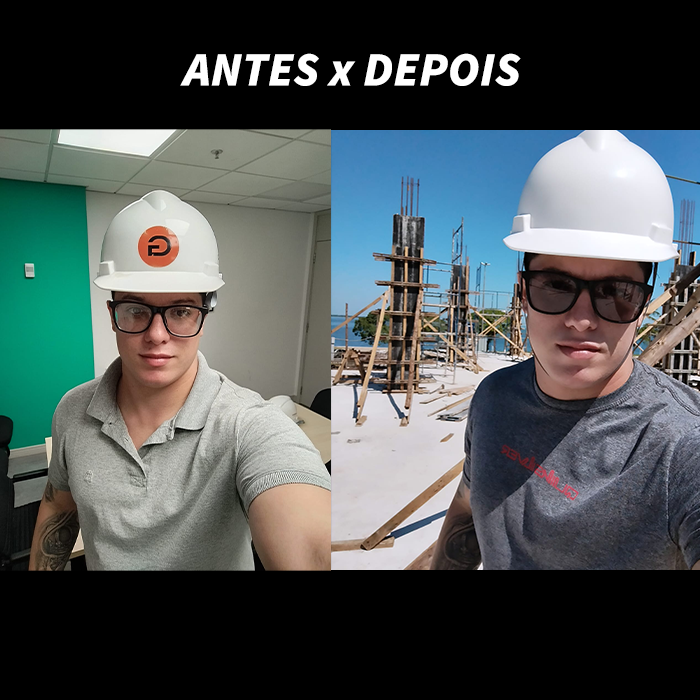
<style>
.page{position:relative;width:700px;height:700px;background:#000000}
.page>*{position:absolute;margin:0}
.t1{font:48px "SourceSansItalic-BlackItalic";color:#ffffff}
</style>
<div class="page">
<p class="t1" style="left:180px;top:53px;width:341px;height:33px">ANTES x DEPOIS</p>
</div>
